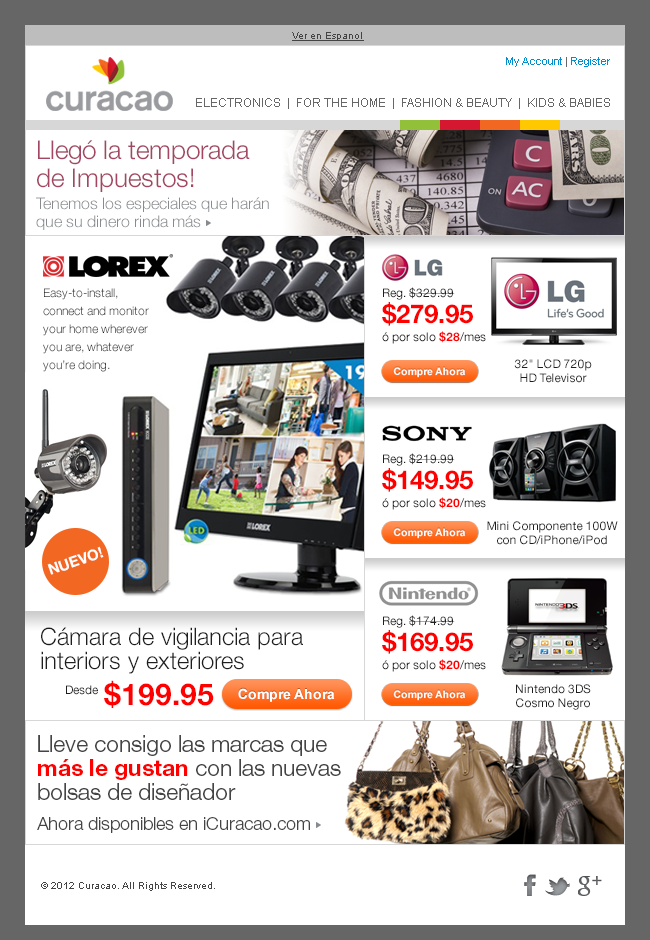
<style>
.page{position:relative;width:650px;height:940px;background:#ffffff}
.page>*{position:absolute;margin:0}
.t1{font:10px "ArialMT";color:#444444;text-decoration:underline}
.t2{font:11px "ArialMT";color:#008ecf}
.t3{font:11px "ArialMT";color:#666666}
.t4{font:12px "ArialMT";color:#666666}
.t5{font:26px/28px "HelveticaNeue-Light";color:#a24661}
.t6{font:16px/22px "HelveticaNeue-Light";color:#878a8e}
.t7{font:16px/18px "HelveticaNeue-Light";color:#878a8e}
.t8{font:12px/18px "HelveticaNeue-Light";color:#1e1e1e}
.t9{font:12px/18px "HelveticaNeue-Roman";color:#1e1e1e}
.t10{font:26px/26px "HelveticaNeue-Bold";color:#ff0000}
.t11{font:12px/18px "HelveticaNeue-Bold";color:#ff0000}
.t12{font:12px/14px "HelveticaNeue-Roman";color:#1e1e1e}
.t13{font:15px "HelveticaNeue-Bold";color:#ffffff}
.t14{font:24px/24px "HelveticaNeue-Light";color:#1e1e1e}
.t15{font:30px/36px "HelveticaNeue-Bold";color:#ff0000}
.t16{font:12px "HelveticaNeue-Roman";color:#1e1e1e}
.t17{font:23px/24px "HelveticaNeue-Light";color:#444444}
.t18{font:23px/24px "HelveticaNeue-Bold";color:#ff0000}
.t19{font:18px/30px "HelveticaNeue-Light";color:#444444}
.t20{font:10px "ArialMT";color:#444444}
</style>
<div class="page">
<p class="t1" style="left:292px;top:32px;width:72px;height:9px">Ver en Espanol</p>
<p class="t2" style="left:506px;top:57px;width:104px;height:10px">My Account<span class="t3"> | </span>Register</p>
<p class="t4" style="left:196px;top:98px;width:414px;height:11px">ELECTRONICS  |  FOR THE HOME  |  FASHION &amp; BEAUTY  |  KIDS &amp; BABIES</p>
<p class="t5" style="left:36px;top:140px;width:233px;height:90px">Llegó la temporada <br>de Impuestos!<br><span class="t6">Tenemos los especiales que harán </span><span class="t7">que su dinero rinda más</span></p>
<p class="t8" style="left:43px;top:288px;width:106px;height:84px">Easy-to-install, <br>connect and monitor <br>your home wherever you are, whatever <br>you’re doing.</p>
<p class="t9" style="left:382px;top:287px;width:104px;height:57px">Reg. $329.99<br><span class="t10">$279.95<br></span>ó por solo <span class="t11">$28</span>/mes</p>
<p class="t12" style="left:514px;top:359px;width:78px;height:24px;text-align:center">32" LCD 720p<br>HD Televisor</p>
<p class="t9" style="left:382px;top:453px;width:104px;height:57px">Reg. $219.99<br><span class="t10">$149.95<br></span>ó por solo <span class="t11">$20</span>/mes</p>
<p class="t12" style="left:487px;top:521px;width:131px;height:24px;text-align:center">Mini Componente 100W<br>con CD/iPhone/iPod</p>
<p class="t13" style="left:47px;top:546px;width:57px;height:29px;rotate:-19deg">NUEVO!</p>
<p class="t9" style="left:382px;top:615px;width:104px;height:57px">Reg. $174.99<br><span class="t10">$169.95<br></span>ó por solo <span class="t11">$20</span>/mes</p>
<p class="t14" style="left:41px;top:627px;width:262px;height:81px">Cámara de vigilancia para<br>interiors y exteriores<br><span class="t15">        $199.95</span></p>
<p class="t16" style="left:66px;top:685px;width:32px;height:10px">Desde</p>
<p class="t12" style="left:516px;top:684px;width:75px;height:26px;text-align:center">Nintendo 3DS<br>Cosmo Negro</p>
<p class="t17" style="left:37px;top:735px;width:304px;height:98px">Lleve consigo las marcas que <span class="t18">más le gustan</span> con las nuevas bolsas de diseñador <br><span class="t19">Ahora disponibles en iCuracao.com</span></p>
<p class="t20" style="left:41px;top:882px;width:174px;height:9px">© 2012 Curacao. All Rights Reserved.</p>
</div>
